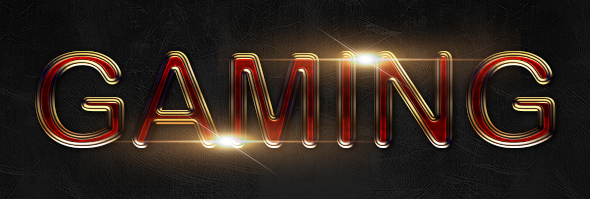
<style>
.page{position:relative;width:590px;height:199px}
.page>*{position:absolute;margin:0}
.t1{font:130px "ArialRoundedMTBold"}
</style>
<div class="page">
<p class="t1" style="left:35px;top:51px;width:521px;height:97px">GAMING</p>
</div>
